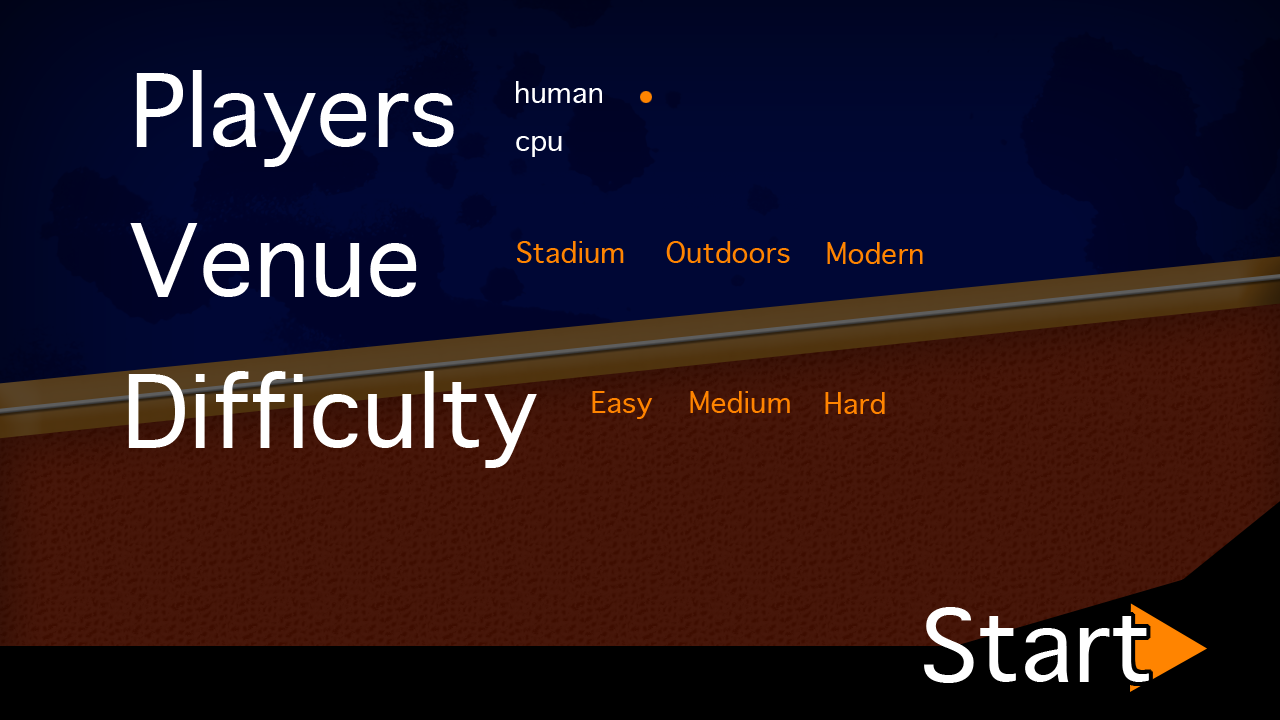
<style>
.page{position:relative;width:1280px;height:720px}
.page>*{position:absolute;margin:0}
.t1{font:96px "GenevaCY";color:#ffffff}
.t2{font:28px "GenevaCY";color:#ffffff}
.t3{font:28px "GenevaCY";color:#ff8400}
</style>
<div class="page">
<p class="t1" style="left:136px;top:70px;width:318px;height:97px">Players</p>
<p class="t2" style="left:516px;top:81px;width:86px;height:22px">human</p>
<p class="t2" style="left:516px;top:136px;width:46px;height:21px">cpu</p>
<p class="t1" style="left:130px;top:223px;width:287px;height:74px">Venue</p>
<p class="t3" style="left:517px;top:241px;width:107px;height:22px">Stadium</p>
<p class="t3" style="left:666px;top:241px;width:124px;height:22px">Outdoors</p>
<p class="t3" style="left:827px;top:242px;width:96px;height:22px">Modern</p>
<p class="t1" style="left:128px;top:371px;width:409px;height:97px">Difficulty</p>
<p class="t3" style="left:592px;top:391px;width:61px;height:28px">Easy</p>
<p class="t3" style="left:690px;top:391px;width:100px;height:22px">Medium</p>
<p class="t3" style="left:825px;top:392px;width:60px;height:22px">Hard</p>
</div>
